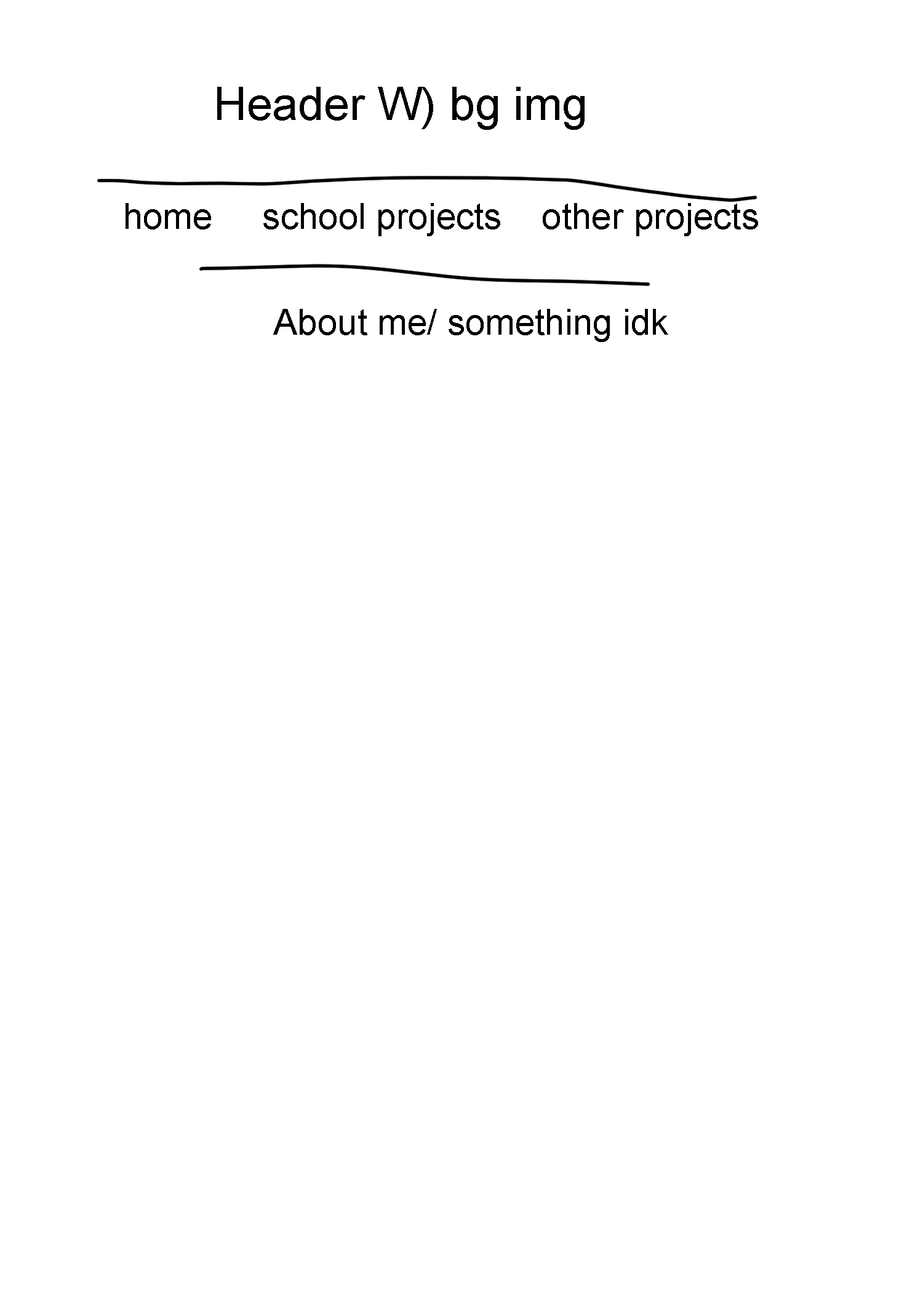
<style>
.page{position:relative;width:923px;height:1292px;background:#ffffff}
.page>*{position:absolute;margin:0}
.t1{font:46.1px "ArialMT";color:#000000}
.t2{font:35.9px "ArialMT";color:#000000}
</style>
<div class="page">
<p class="t1" style="left:217px;top:87px;width:368px;height:43px">Header W) bg img</p>
<p class="t2" style="left:126px;top:203px;width:632px;height:33px">home     school projects    other projects</p>
<p class="t2" style="left:273px;top:309px;width:395px;height:33px">About me/ something idk</p>
</div>
